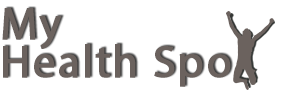
<style>
.page{position:relative;width:290px;height:90px;background:#ffffff}
.page>*{position:absolute;margin:0}
.t1{font:45.8px/37.5px "MyriadPro-Regular";letter-spacing:0.025em;color:#6b625e;font-weight:bold}
</style>
<div class="page">
<p class="t1" style="left:2px;top:8px;width:229px;height:79px">My<br>Health Spo</p>
</div>
